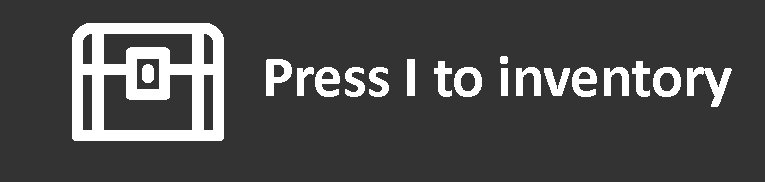
<style>
.page{position:relative;width:765px;height:182px;background:#333333}
.page>*{position:absolute;margin:0}
.t1{font:59px "Calibri-Bold";color:#ffffff}
</style>
<div class="page">
<p class="t1" style="left:266px;top:56px;width:466px;height:51px">Press I to inventory</p>
</div>
